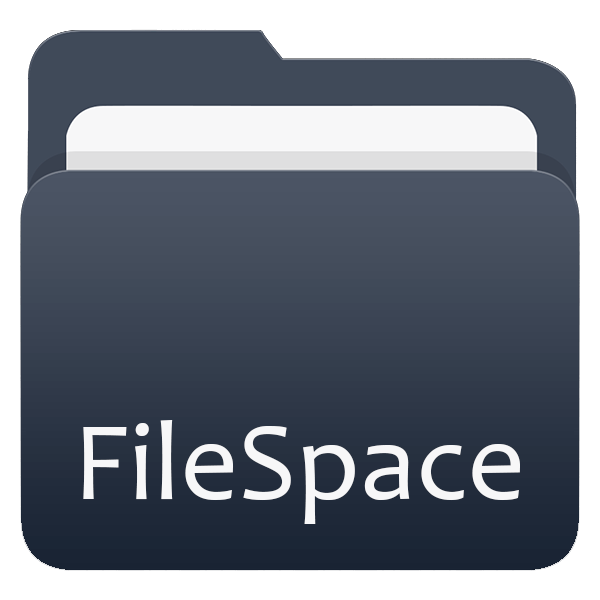
<style>
.page{position:relative;width:600px;height:600px}
.page>*{position:absolute;margin:0}
.t1{font:114px "Candara";color:#f7f7f8}
</style>
<div class="page">
<p class="t1" style="left:83px;top:420px;width:437px;height:104px">FileSpace</p>
</div>
